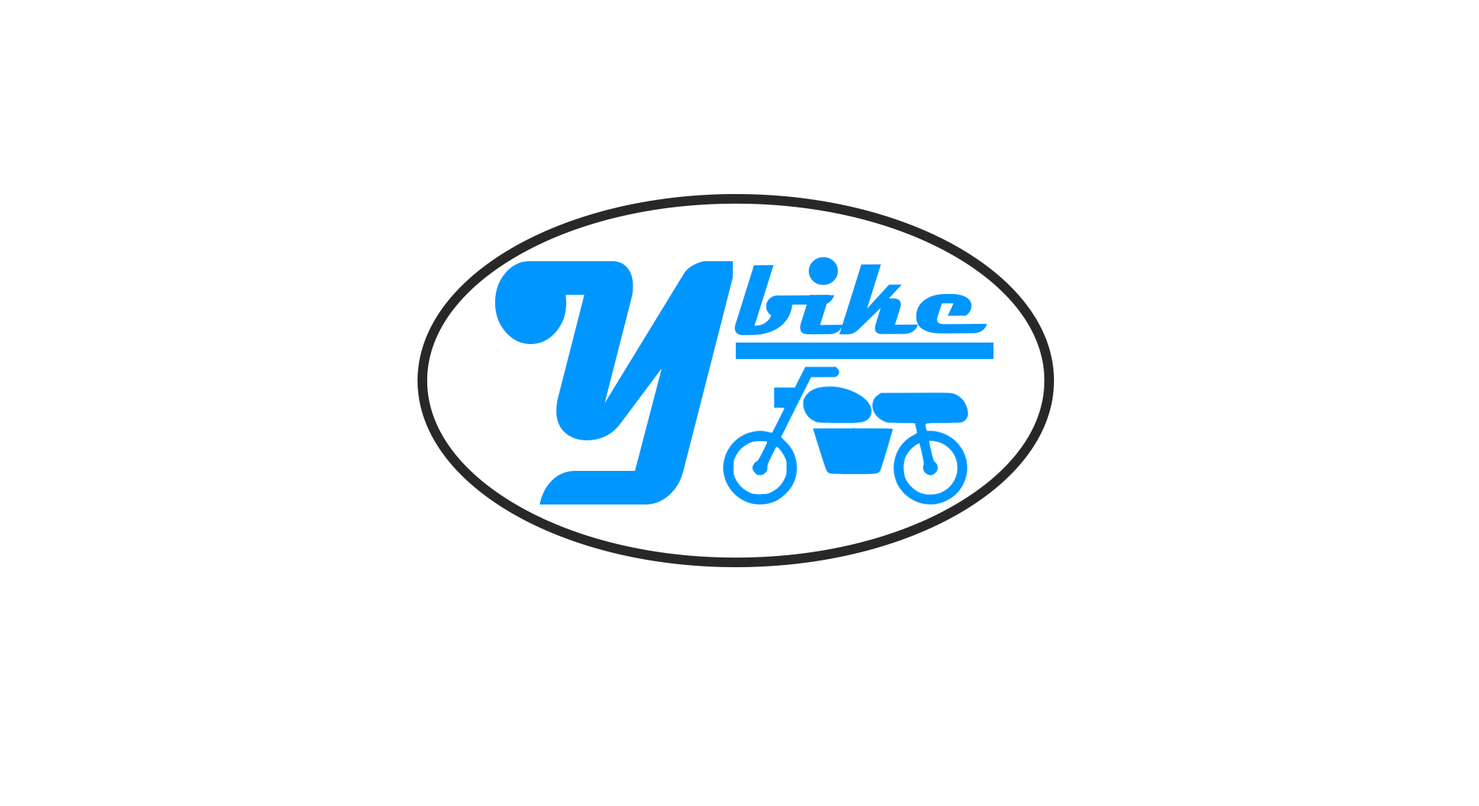
<style>
.page{position:relative;width:1479px;height:806px;background:#ffffff}
.page>*{position:absolute;margin:0}
.t1{font:118.5px "Magneto-Bold";color:#0096ff;scale:0.95 1}
.t2{font:354.3px "Magneto-Bold";color:#0096ff;scale:0.77 1}
</style>
<div class="page">
<p class="t1" style="left:734px;top:257px;width:252px;height:78px">bike</p>
<p class="t2" style="left:494px;top:261px;width:239px;height:244px">Y</p>
</div>
